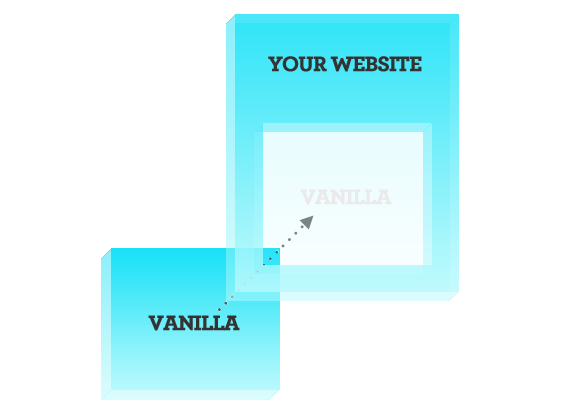
<style>
.page{position:relative;width:573px;height:416px;background:#ffffff}
.page>*{position:absolute;margin:0}
.t1{font:22px "Archer-Bold";letter-spacing:-0.05em;color:#333333;font-weight:bold}
.t2{font:22px "Archer-Bold";letter-spacing:-0.05em;color:#eaeaea;font-weight:bold}
</style>
<div class="page">
<p class="t1" style="left:268px;top:56px;width:154px;height:16px">YOUR WEBSITE</p>
<p class="t2" style="left:300px;top:189px;width:92px;height:16px">VANILLA</p>
<p class="t1" style="left:148px;top:315px;width:92px;height:16px">VANILLA</p>
</div>
